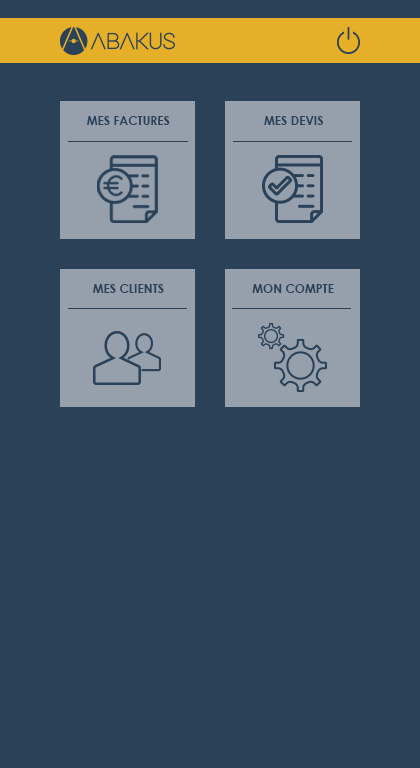
<style>
.page{position:relative;width:420px;height:768px;background:#2a4158}
.page>*{position:absolute;margin:0}
.t1{font:12.1px "CenturyGothic-Bold";color:#2a4158;text-transform:uppercase}
</style>
<div class="page">
<p class="t1" style="left:87px;top:116px;width:83px;height:9px">Mes factures</p>
<p class="t1" style="left:264px;top:116px;width:59px;height:9px">Mes devis</p>
<p class="t1" style="left:93px;top:284px;width:71px;height:9px">mes clients</p>
<p class="t1" style="left:252px;top:284px;width:82px;height:9px">mon compte</p>
</div>
